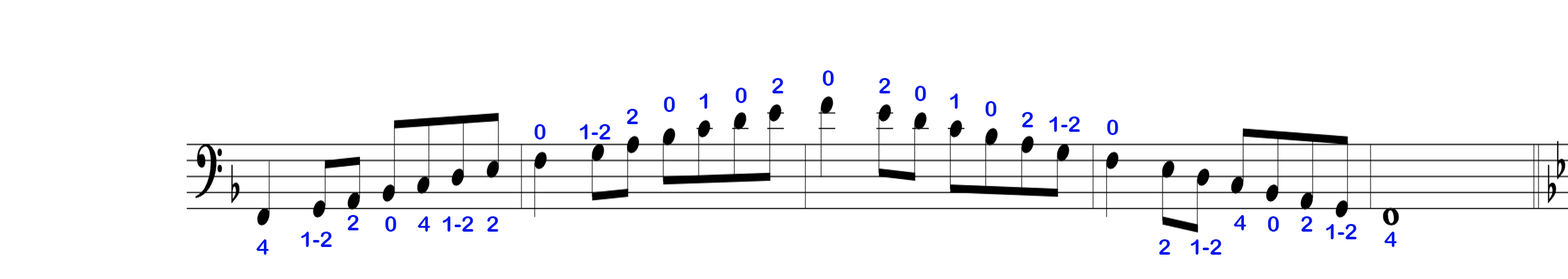
<style>
.page{position:relative;width:1568px;height:279px;background:#ffffff}
.page>*{position:absolute;margin:0}
.t1{font:21.8px "ArialRoundedMTBold";color:#0417ec}
</style>
<div class="page">
<p class="t1" style="left:822px;top:70px;width:12px;height:16px">0</p>
<p class="t1" style="left:735px;top:88px;width:12px;height:15px">0</p>
<p class="t1" style="left:772px;top:78px;width:11px;height:16px">2</p>
<p class="t1" style="left:879px;top:78px;width:11px;height:16px">2</p>
<p class="t1" style="left:915px;top:86px;width:11px;height:15px">0</p>
<p class="t1" style="left:664px;top:97px;width:11px;height:15px">0</p>
<p class="t1" style="left:699px;top:94px;width:9px;height:15px">1</p>
<p class="t1" style="left:950px;top:94px;width:8px;height:15px">1</p>
<p class="t1" style="left:985px;top:101px;width:12px;height:16px">0</p>
<p class="t1" style="left:626px;top:109px;width:12px;height:15px">2</p>
<p class="t1" style="left:1022px;top:112px;width:11px;height:15px">2</p>
<p class="t1" style="left:534px;top:124px;width:12px;height:16px">0</p>
<p class="t1" style="left:580px;top:124px;width:30px;height:16px">1-2</p>
<p class="t1" style="left:1049px;top:117px;width:31px;height:15px">1-2</p>
<p class="t1" style="left:1107px;top:120px;width:11px;height:15px">0</p>
<p class="t1" style="left:347px;top:215px;width:12px;height:16px">2</p>
<p class="t1" style="left:385px;top:216px;width:11px;height:16px">0</p>
<p class="t1" style="left:418px;top:216px;width:12px;height:16px">4</p>
<p class="t1" style="left:443px;top:216px;width:30px;height:16px">1-2</p>
<p class="t1" style="left:487px;top:216px;width:11px;height:16px">2</p>
<p class="t1" style="left:1234px;top:215px;width:12px;height:16px">4</p>
<p class="t1" style="left:1268px;top:216px;width:11px;height:16px">0</p>
<p class="t1" style="left:1301px;top:216px;width:11px;height:16px">2</p>
<p class="t1" style="left:301px;top:232px;width:31px;height:15px">1-2</p>
<p class="t1" style="left:1326px;top:224px;width:31px;height:16px">1-2</p>
<p class="t1" style="left:1384px;top:232px;width:13px;height:15px">4</p>
<p class="t1" style="left:256px;top:240px;width:13px;height:15px">4</p>
<p class="t1" style="left:1159px;top:240px;width:11px;height:15px">2</p>
<p class="t1" style="left:1191px;top:240px;width:30px;height:15px">1-2</p>
</div>
